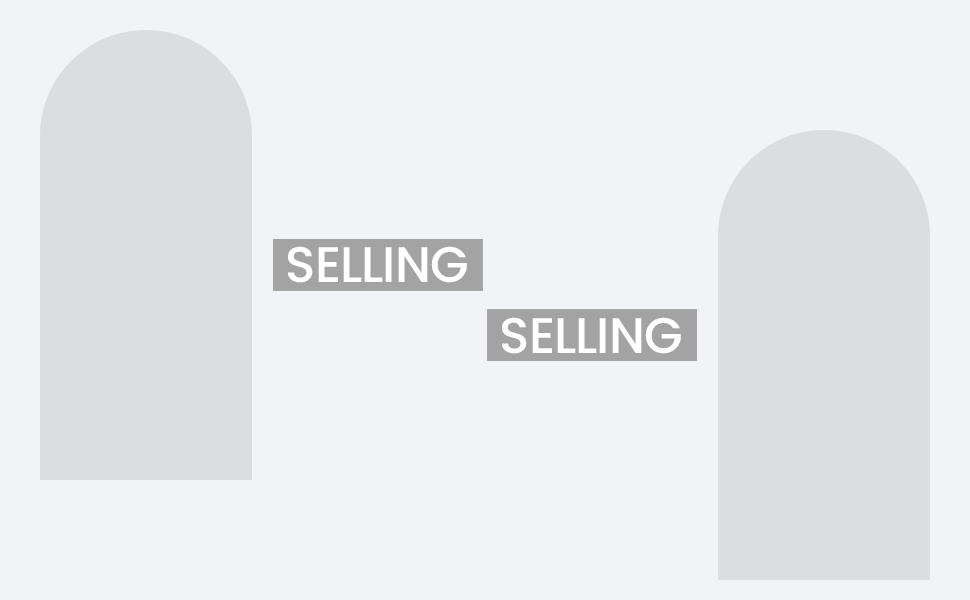
<style>
.page{position:relative;width:970px;height:600px;background:#f2f3f6}
.page>*{position:absolute;margin:0}
.t1{font:50px "Poppins-Medium";color:#ffffff;text-transform:uppercase}
</style>
<div class="page">
<p class="t1" style="left:288px;top:246px;width:179px;height:37px">selling</p>
<p class="t1" style="left:502px;top:317px;width:179px;height:37px">selling</p>
</div>
